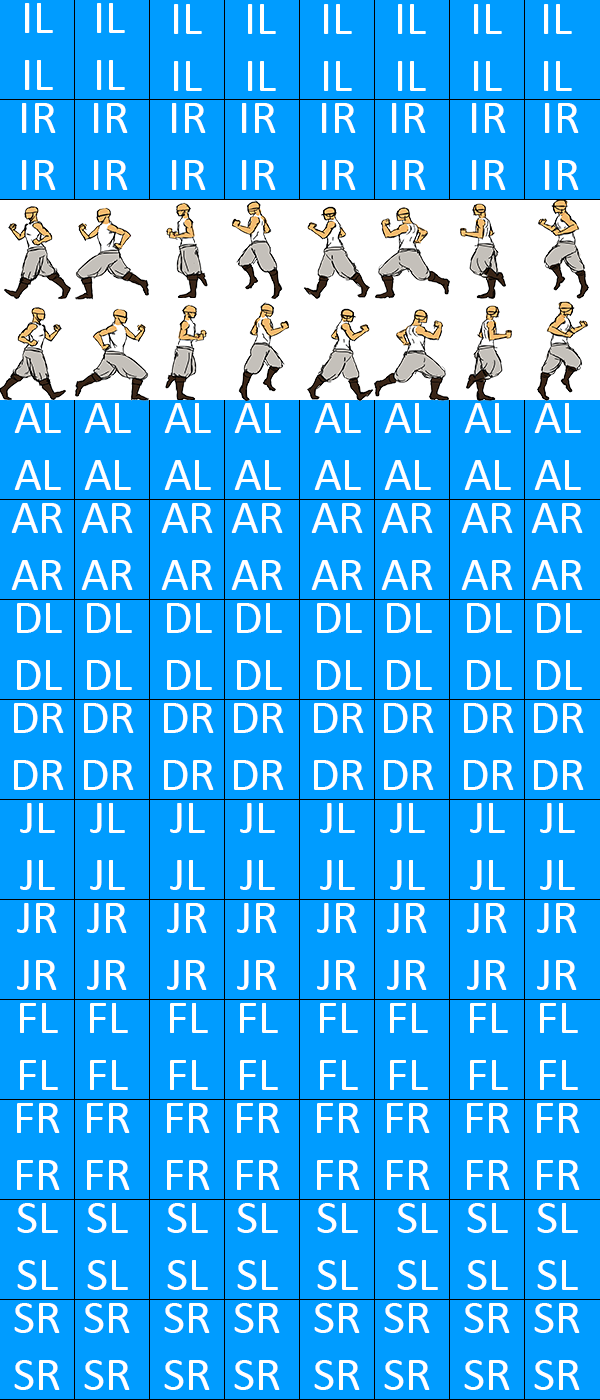
<style>
.page{position:relative;width:600px;height:1400px;background:#009cff}
.page>*{position:absolute;margin:0}
.t1{font:48px "Calibri";color:#ffffff}
</style>
<div class="page">
<p class="t1" style="left:25px;top:3px;width:28px;height:87px;text-align:center">IL<br>IL</p>
<p class="t1" style="left:22px;top:103px;width:34px;height:87px;text-align:center">IR<br>IR</p>
<p class="t1" style="left:94px;top:103px;width:34px;height:87px;text-align:center">IR<br>IR</p>
<p class="t1" style="left:172px;top:103px;width:34px;height:87px;text-align:center">IR<br>IR</p>
<p class="t1" style="left:242px;top:103px;width:34px;height:87px;text-align:center">IR<br>IR</p>
<p class="t1" style="left:322px;top:103px;width:34px;height:87px;text-align:center">IR<br>IR</p>
<p class="t1" style="left:392px;top:103px;width:34px;height:87px;text-align:center">IR<br>IR</p>
<p class="t1" style="left:472px;top:103px;width:34px;height:87px;text-align:center">IR<br>IR</p>
<p class="t1" style="left:545px;top:103px;width:34px;height:87px;text-align:center">IR<br>IR</p>
<p class="t1" style="left:14px;top:403px;width:47px;height:87px;text-align:center">AL<br>AL</p>
<p class="t1" style="left:84px;top:403px;width:47px;height:87px;text-align:center">AL<br>AL</p>
<p class="t1" style="left:164px;top:403px;width:47px;height:87px;text-align:center">AL<br>AL</p>
<p class="t1" style="left:234px;top:403px;width:47px;height:87px;text-align:center">AL<br>AL</p>
<p class="t1" style="left:314px;top:403px;width:47px;height:87px;text-align:center">AL<br>AL</p>
<p class="t1" style="left:384px;top:403px;width:47px;height:87px;text-align:center">AL<br>AL</p>
<p class="t1" style="left:464px;top:403px;width:47px;height:87px;text-align:center">AL<br>AL</p>
<p class="t1" style="left:534px;top:403px;width:47px;height:87px;text-align:center">AL<br>AL</p>
<p class="t1" style="left:11px;top:503px;width:52px;height:87px;text-align:center">AR<br>AR</p>
<p class="t1" style="left:81px;top:503px;width:52px;height:87px;text-align:center">AR<br>AR</p>
<p class="t1" style="left:161px;top:503px;width:52px;height:87px;text-align:center">AR<br>AR</p>
<p class="t1" style="left:231px;top:503px;width:52px;height:87px;text-align:center">AR<br>AR</p>
<p class="t1" style="left:311px;top:503px;width:52px;height:87px;text-align:center">AR<br>AR</p>
<p class="t1" style="left:381px;top:503px;width:52px;height:87px;text-align:center">AR<br>AR</p>
<p class="t1" style="left:461px;top:503px;width:52px;height:87px;text-align:center">AR<br>AR</p>
<p class="t1" style="left:531px;top:503px;width:52px;height:87px;text-align:center">AR<br>AR</p>
<p class="t1" style="left:17px;top:603px;width:45px;height:87px;text-align:center">DL<br>DL</p>
<p class="t1" style="left:87px;top:603px;width:45px;height:87px;text-align:center">DL<br>DL</p>
<p class="t1" style="left:167px;top:603px;width:45px;height:87px;text-align:center">DL<br>DL</p>
<p class="t1" style="left:237px;top:603px;width:45px;height:87px;text-align:center">DL<br>DL</p>
<p class="t1" style="left:317px;top:603px;width:45px;height:87px;text-align:center">DL<br>DL</p>
<p class="t1" style="left:387px;top:603px;width:45px;height:87px;text-align:center">DL<br>DL</p>
<p class="t1" style="left:467px;top:603px;width:45px;height:87px;text-align:center">DL<br>DL</p>
<p class="t1" style="left:537px;top:603px;width:45px;height:87px;text-align:center">DL<br>DL</p>
<p class="t1" style="left:14px;top:703px;width:50px;height:87px;text-align:center">DR<br>DR</p>
<p class="t1" style="left:84px;top:703px;width:50px;height:87px;text-align:center">DR<br>DR</p>
<p class="t1" style="left:164px;top:703px;width:50px;height:87px;text-align:center">DR<br>DR</p>
<p class="t1" style="left:234px;top:703px;width:50px;height:87px;text-align:center">DR<br>DR</p>
<p class="t1" style="left:314px;top:703px;width:50px;height:87px;text-align:center">DR<br>DR</p>
<p class="t1" style="left:384px;top:703px;width:50px;height:87px;text-align:center">DR<br>DR</p>
<p class="t1" style="left:464px;top:703px;width:50px;height:87px;text-align:center">DR<br>DR</p>
<p class="t1" style="left:534px;top:703px;width:50px;height:87px;text-align:center">DR<br>DR</p>
<p class="t1" style="left:20px;top:803px;width:35px;height:87px;text-align:center">JL<br>JL</p>
<p class="t1" style="left:90px;top:803px;width:35px;height:87px;text-align:center">JL<br>JL</p>
<p class="t1" style="left:170px;top:803px;width:35px;height:87px;text-align:center">JL<br>JL</p>
<p class="t1" style="left:240px;top:803px;width:35px;height:87px;text-align:center">JL<br>JL</p>
<p class="t1" style="left:320px;top:803px;width:35px;height:87px;text-align:center">JL<br>JL</p>
<p class="t1" style="left:390px;top:803px;width:35px;height:87px;text-align:center">JL<br>JL</p>
<p class="t1" style="left:470px;top:803px;width:35px;height:87px;text-align:center">JL<br>JL</p>
<p class="t1" style="left:540px;top:803px;width:35px;height:87px;text-align:center">JL<br>JL</p>
<p class="t1" style="left:17px;top:903px;width:40px;height:87px;text-align:center">JR<br>JR</p>
<p class="t1" style="left:87px;top:903px;width:40px;height:87px;text-align:center">JR<br>JR</p>
<p class="t1" style="left:167px;top:903px;width:40px;height:87px;text-align:center">JR<br>JR</p>
<p class="t1" style="left:237px;top:903px;width:40px;height:87px;text-align:center">JR<br>JR</p>
<p class="t1" style="left:317px;top:903px;width:40px;height:87px;text-align:center">JR<br>JR</p>
<p class="t1" style="left:387px;top:903px;width:40px;height:87px;text-align:center">JR<br>JR</p>
<p class="t1" style="left:467px;top:903px;width:40px;height:87px;text-align:center">JR<br>JR</p>
<p class="t1" style="left:537px;top:903px;width:40px;height:87px;text-align:center">JR<br>JR</p>
<p class="t1" style="left:20px;top:1003px;width:38px;height:87px;text-align:center">FL<br>FL</p>
<p class="t1" style="left:90px;top:1003px;width:38px;height:87px;text-align:center">FL<br>FL</p>
<p class="t1" style="left:170px;top:1003px;width:38px;height:87px;text-align:center">FL<br>FL</p>
<p class="t1" style="left:240px;top:1003px;width:38px;height:87px;text-align:center">FL<br>FL</p>
<p class="t1" style="left:320px;top:1003px;width:38px;height:87px;text-align:center">FL<br>FL</p>
<p class="t1" style="left:390px;top:1003px;width:38px;height:87px;text-align:center">FL<br>FL</p>
<p class="t1" style="left:470px;top:1003px;width:38px;height:87px;text-align:center">FL<br>FL</p>
<p class="t1" style="left:540px;top:1003px;width:38px;height:87px;text-align:center">FL<br>FL</p>
<p class="t1" style="left:17px;top:1103px;width:43px;height:87px;text-align:center">FR<br>FR</p>
<p class="t1" style="left:87px;top:1103px;width:43px;height:87px;text-align:center">FR<br>FR</p>
<p class="t1" style="left:167px;top:1103px;width:43px;height:87px;text-align:center">FR<br>FR</p>
<p class="t1" style="left:237px;top:1103px;width:43px;height:87px;text-align:center">FR<br>FR</p>
<p class="t1" style="left:317px;top:1103px;width:43px;height:87px;text-align:center">FR<br>FR</p>
<p class="t1" style="left:387px;top:1103px;width:43px;height:87px;text-align:center">FR<br>FR</p>
<p class="t1" style="left:467px;top:1103px;width:43px;height:87px;text-align:center">FR<br>FR</p>
<p class="t1" style="left:537px;top:1103px;width:43px;height:87px;text-align:center">FR<br>FR</p>
<p class="t1" style="left:17px;top:1203px;width:41px;height:87px;text-align:center">SL<br>SL</p>
<p class="t1" style="left:87px;top:1203px;width:41px;height:87px;text-align:center">SL<br>SL</p>
<p class="t1" style="left:167px;top:1203px;width:41px;height:87px;text-align:center">SL<br>SL</p>
<p class="t1" style="left:237px;top:1203px;width:41px;height:87px;text-align:center">SL<br>SL</p>
<p class="t1" style="left:317px;top:1203px;width:41px;height:87px;text-align:center">SL<br>SL</p>
<p class="t1" style="left:397px;top:1203px;width:41px;height:87px;text-align:center">SL<br>SL</p>
<p class="t1" style="left:467px;top:1203px;width:41px;height:87px;text-align:center">SL<br>SL</p>
<p class="t1" style="left:537px;top:1203px;width:41px;height:87px;text-align:center">SL<br>SL</p>
<p class="t1" style="left:14px;top:1303px;width:46px;height:87px;text-align:center">SR<br>SR</p>
<p class="t1" style="left:84px;top:1303px;width:46px;height:87px;text-align:center">SR<br>SR</p>
<p class="t1" style="left:164px;top:1303px;width:46px;height:87px;text-align:center">SR<br>SR</p>
<p class="t1" style="left:234px;top:1303px;width:46px;height:87px;text-align:center">SR<br>SR</p>
<p class="t1" style="left:314px;top:1303px;width:46px;height:87px;text-align:center">SR<br>SR</p>
<p class="t1" style="left:384px;top:1303px;width:46px;height:87px;text-align:center">SR<br>SR</p>
<p class="t1" style="left:464px;top:1303px;width:46px;height:87px;text-align:center">SR<br>SR</p>
<p class="t1" style="left:534px;top:1303px;width:46px;height:87px;text-align:center">SR<br>SR</p>
</div>
